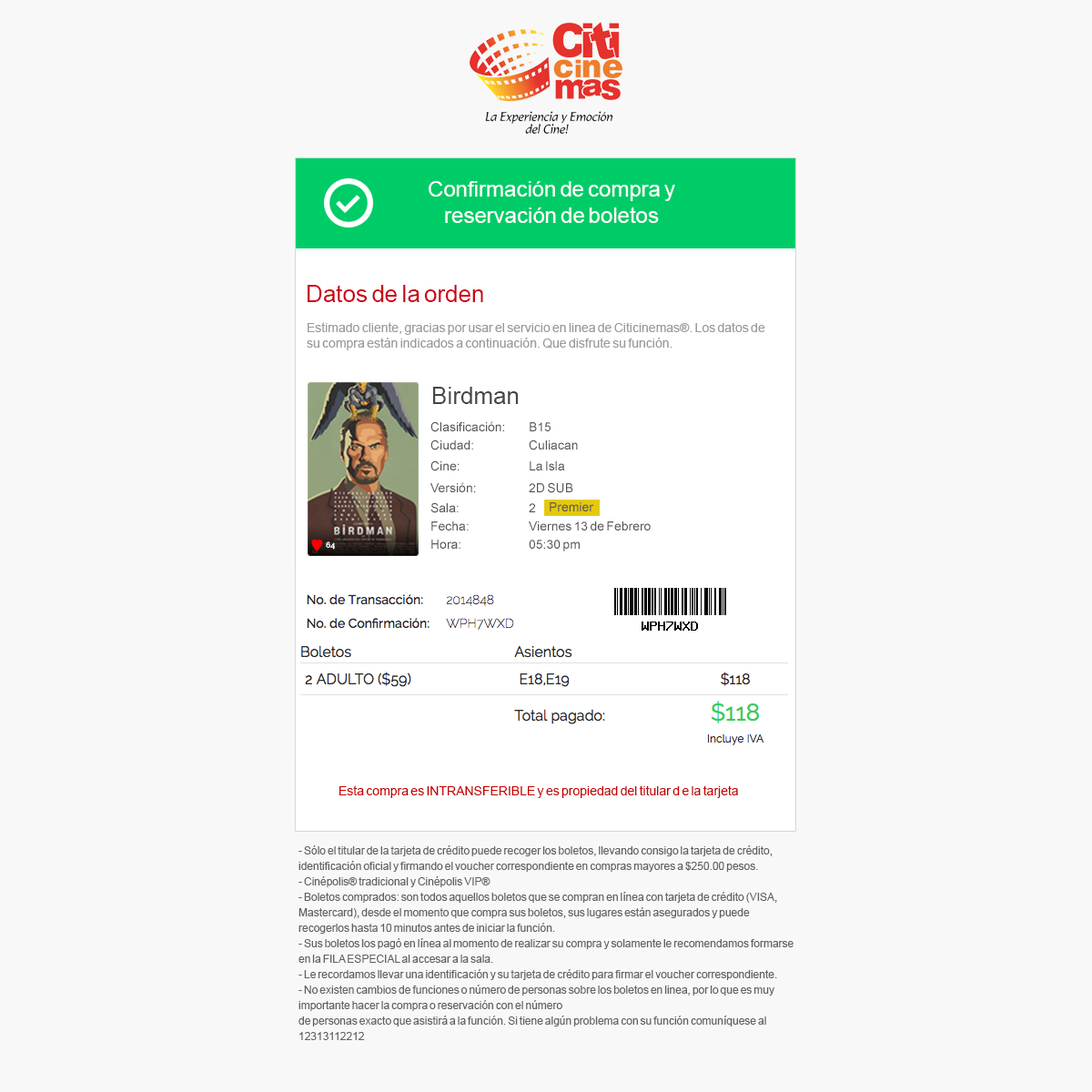
<style>
.page{position:relative;width:1092px;height:1092px;background:#f8f8f8}
.page>*{position:absolute;margin:0}
.t1{font:21.8px "ArialMT";color:#ffffff}
.t2{font:23.7px "ArialMT";color:#cc0017}
.t3{font:12.7px "ArialMT";color:#9b9b9b}
.t4{font:23.7px "ArialMT";color:#464646}
.t5{font:12.7px "ArialMT";color:#565656}
.t6{font:8.1px "Raleway-Bold";color:#ffffff}
.t7{font:12.7px "ArialMT";color:#c50000}
.t8{font:10.9px/15.5px "ArialMT";color:#616161}
</style>
<div class="page">
<p class="t1" style="left:429px;top:181px;width:246px;height:42px;text-align:center">Confirmación de compra y <br>reservación de boletos</p>
<p class="t2" style="left:308px;top:285px;width:175px;height:17px">Datos de la orden</p>
<p class="t3" style="left:307px;top:322px;width:458px;height:28px">Estimado cliente, gracias por usar el servicio en linea de Citicinemas®. Los datos de su compra están indicados a continuación. Que disfrute su función.</p>
<p class="t4" style="left:433px;top:387px;width:86px;height:17px">Birdman</p>
<p class="t5" style="left:430px;top:421px;width:121px;height:11px">Clasificación: B15</p>
<p class="t5" style="left:430px;top:440px;width:148px;height:10px">Ciudad:  Culiacan</p>
<p class="t5" style="left:430px;top:460px;width:135px;height:11px">Cine:   La Isla</p>
<p class="t5" style="left:430px;top:482px;width:143px;height:11px">Versión:  2D SUB</p>
<p class="t5" style="left:430px;top:502px;width:105px;height:11px">Sala:   2</p>
<p class="t5" style="left:550px;top:502px;width:44px;height:9px">Premier</p>
<p class="t5" style="left:431px;top:521px;width:220px;height:10px">Fecha:  Viernes 13 de Febrero</p>
<p class="t6" style="left:326px;top:541px;width:9px;height:9px">64</p>
<p class="t5" style="left:431px;top:540px;width:149px;height:11px">Hora:   05:30 pm</p>
<p class="t7" style="left:339px;top:785px;width:399px;height:13px">Esta compra es INTRANSFERIBLE y es propiedad del titular d e la tarjeta</p>
<p class="t8" style="left:298px;top:845px;width:496px;height:195px">- Sólo el titular de la tarjeta de crédito puede recoger los boletos, llevando consigo la tarjeta de crédito, identificación oficial y firmando el voucher correspondiente en compras mayores a $250.00 pesos.<br>- Cinépolis® tradicional y Cinépolis VIP®<br>- Boletos comprados: son todos aquellos boletos que se compran en línea con tarjeta de crédito (VISA, Mastercard), desde el momento que compra sus boletos, sus lugares están asegurados y puede recogerlos hasta 10 minutos antes de iniciar la función.<br>- Sus boletos los pagó en línea al momento de realizar su compra y solamente le recomendamos formarse en la FILA ESPECIAL al accesar a la sala.<br>- Le recordamos llevar una identificación y su tarjeta de crédito para firmar el voucher correspondiente.<br>- No existen cambios de funciones o número de personas sobre los boletos en linea, por lo que es muy importante hacer la compra o reservación con el número<br>de personas exacto que asistirá a la función. Si tiene algún problema con su función comuníquese al 12313112212</p>
</div>
